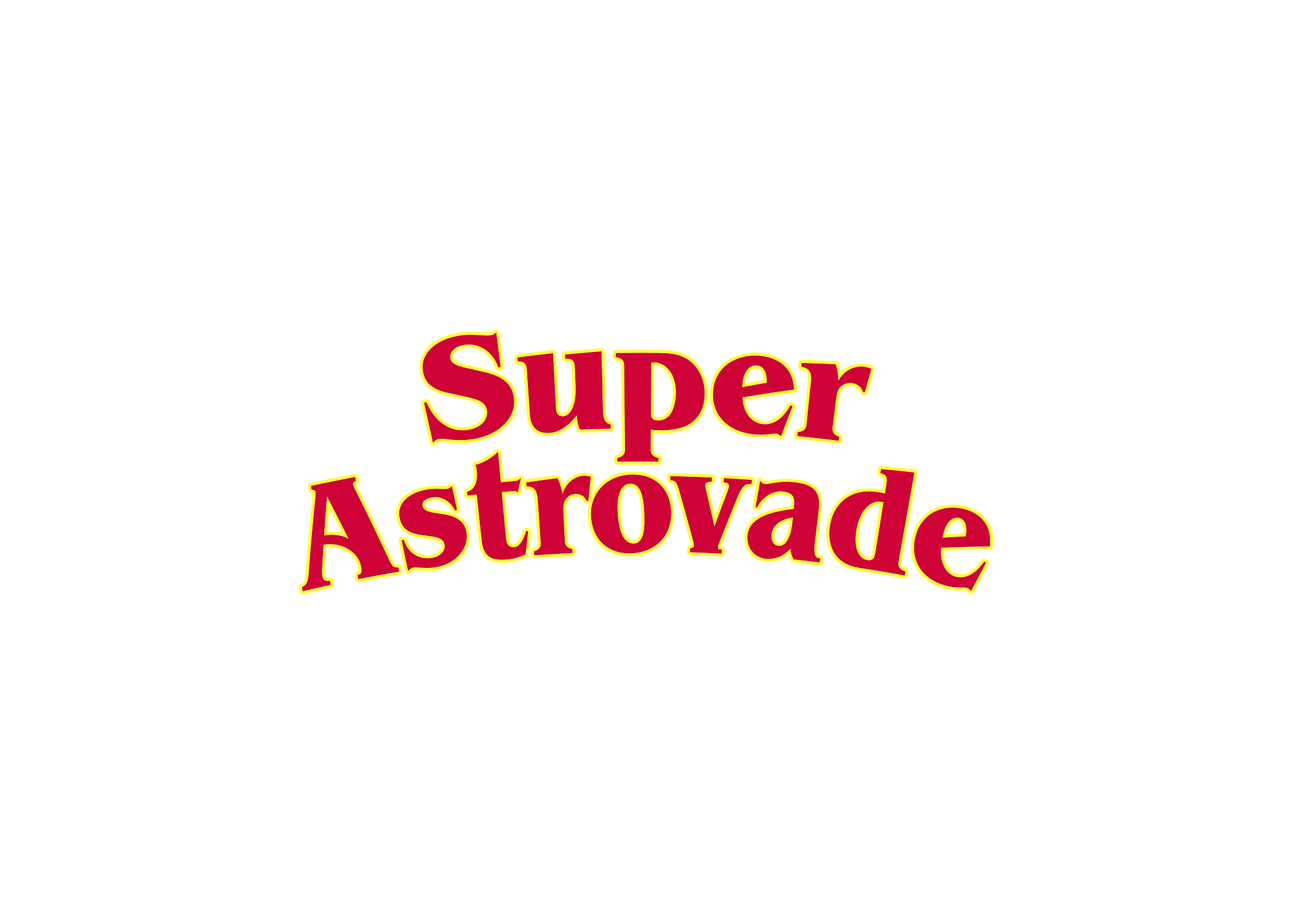
<style>
.page{position:relative;width:1292px;height:923px;background:#ffffff}
.page>*{position:absolute;margin:0}
.t1{font:153.8px/123.1px "BenguiatStd-BoldCondensed";color:#ce0237}
</style>
<div class="page">
<p class="t1" style="left:301px;top:332px;width:690px;height:259px;text-align:center">Super<br>Astrovade</p>
<p class="t1" style="left:301px;top:332px;width:690px;height:259px;text-align:center">Super<br>Astrovade</p>
</div>
